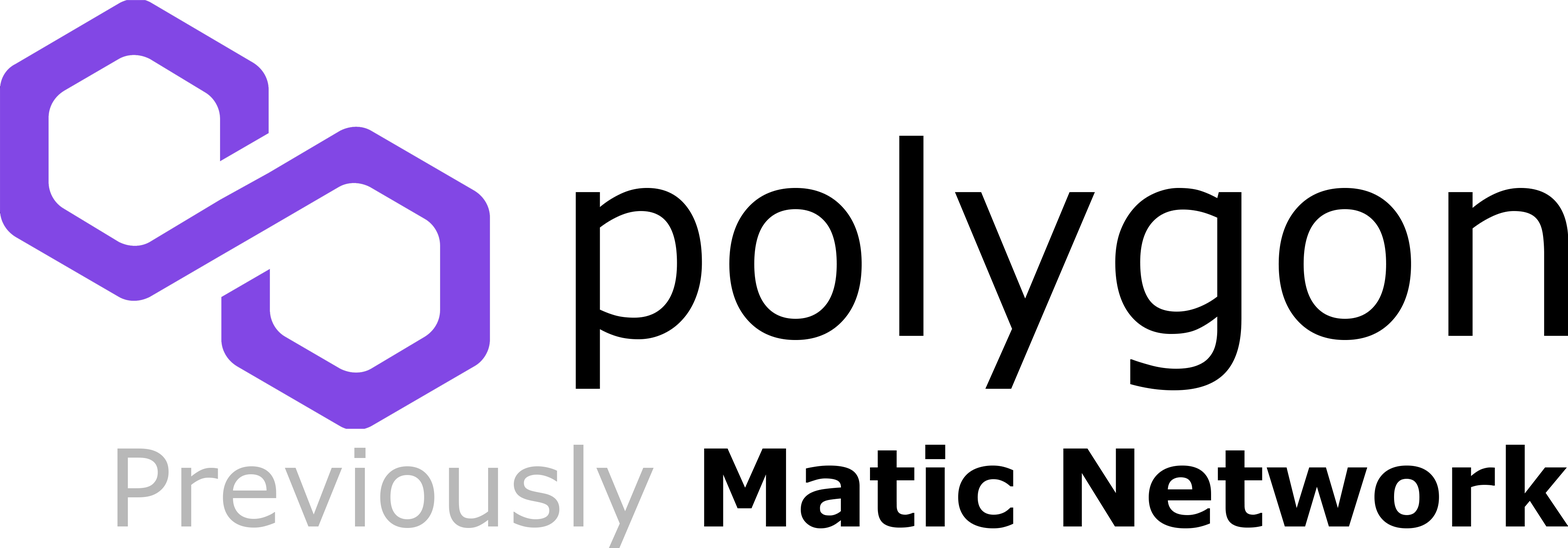
<style>
.page{position:relative;width:1568px;height:548px;background:#ffffff}
.page>*{position:absolute;margin:0}
.t1{font:263.1px "Verdana";color:#000000}
.t2{font:107.4px "Verdana-Bold";color:#000000}
.t3{font:107.4px "Verdana";color:#b8b8b8}
</style>
<div class="page">
<p class="t1" style="left:575px;top:135px;width:993px;height:255px">polygon</p>
<p class="t2" style="left:117px;top:444px;width:1451px;height:104px"><span class="t3">Previously </span>Matic Network</p>
</div>
